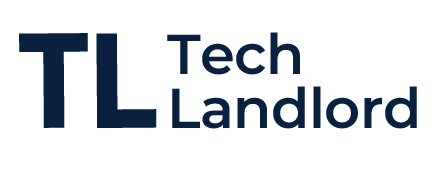
<style>
.page{position:relative;width:434px;height:175px;background:#ffffff}
.page>*{position:absolute;margin:0}
.t1{font:133px "Kollektif-Bold";color:#09203f}
.t2{font:56px/53.4px "Montserrat-SemiBold";letter-spacing:-0.01em;color:#09203f}
</style>
<div class="page">
<p class="t1" style="left:19px;top:33px;width:138px;height:95px">TL</p>
<p class="t2" style="left:167px;top:32px;width:250px;height:97px">Tech <br>Landlord</p>
</div>
